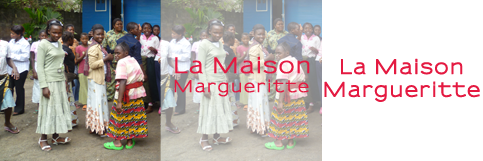
<style>
.page{position:relative;width:483px;height:161px;background:#ffffff}
.page>*{position:absolute;margin:0}
.t1{font:19px "Sansumi-Bold";letter-spacing:0.06em;color:#e41a41;font-weight:bold}
</style>
<div class="page">
<p class="t1" style="left:324px;top:58px;width:156px;height:44px;text-align:center">La Maison<br>Margueritte</p>
</div>
